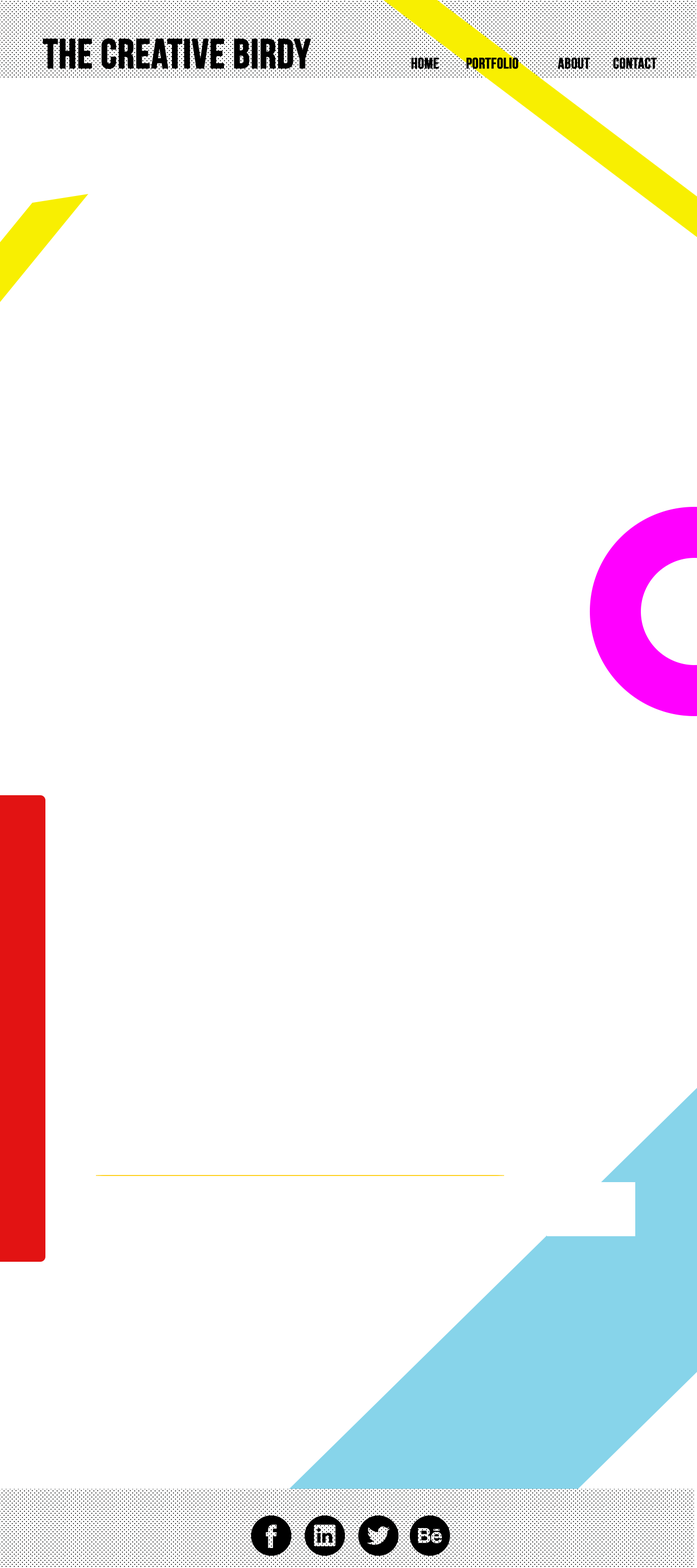
<style>
.page{position:relative;width:697px;height:1568px;background:#ffffff}
.page>*{position:absolute;margin:0}
.t1{font:40.8px "BebasNeue";color:#000000;font-weight:bold}
.t2{font:15.3px "BebasNeue";color:#000000;text-transform:uppercase;font-weight:bold}
</style>
<div class="page">
<p class="t1" style="left:43px;top:38px;width:268px;height:31px">THE CREATIVE BIRDY</p>
<p class="t2" style="left:411px;top:57px;width:246px;height:12px">home   PORTFOLIO   about   contact</p>
</div>
